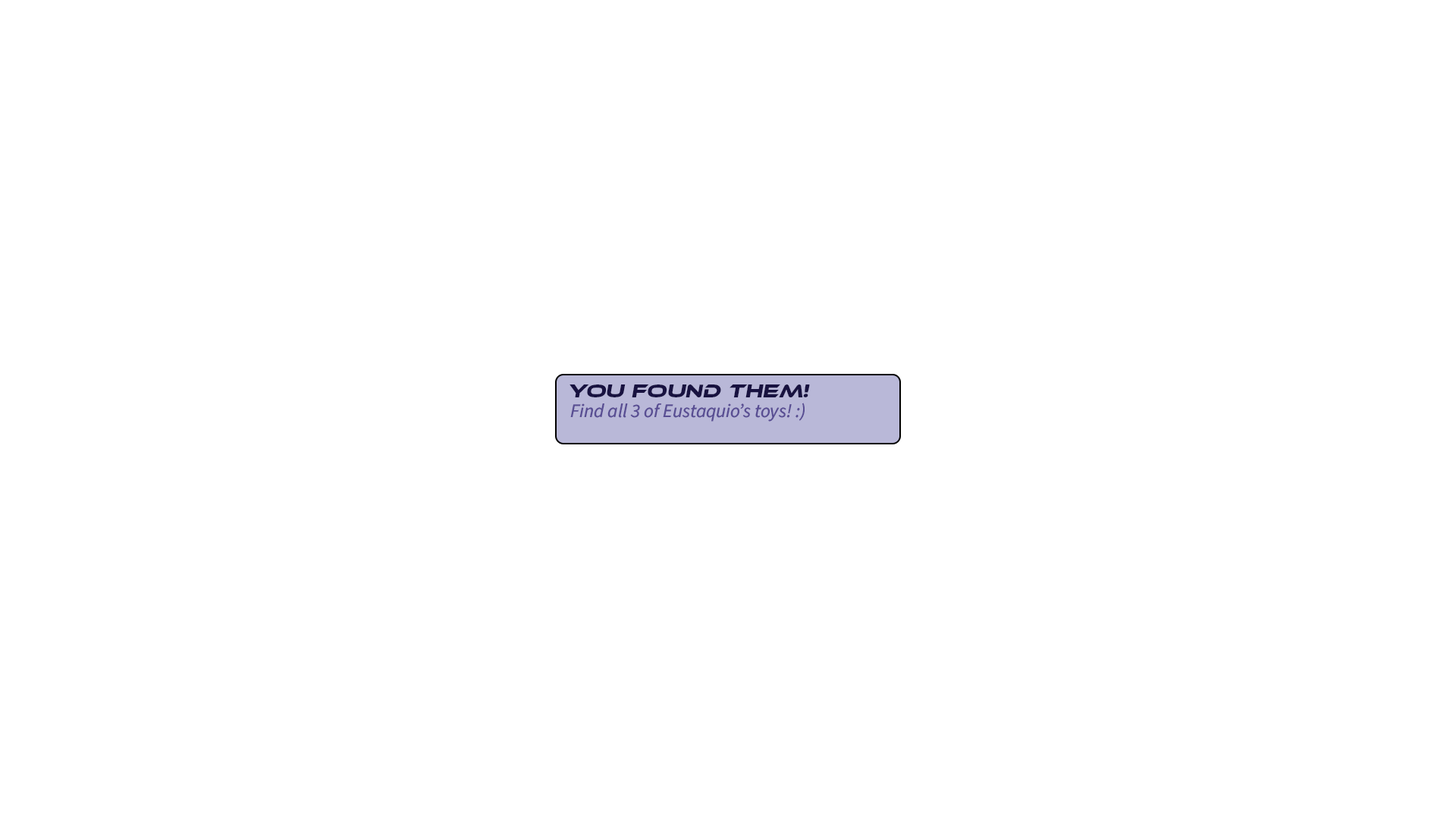
<style>
.page{position:relative;width:1456px;height:819px;background:#ffffff}
.page>*{position:absolute;margin:0}
.t1{font:19px "EthnocentricRg-Italic";color:#181240}
.t2{font:19px "SourceSans3Italic-Italic";color:#594e93}
</style>
<div class="page">
<p class="t1" style="left:570px;top:384px;width:240px;height:13px">You found them!</p>
<p class="t2" style="left:570px;top:403px;width:235px;height:19px">Find all 3 of Eustaquio’s toys! :)</p>
</div>
